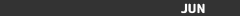
<style>
.page{position:relative;width:240px;height:16px;background:#333333}
.page>*{position:absolute;margin:0}
.t1{font:12.5px "RoundedMplus1c-ExtraBold";color:#ffffff}
</style>
<div class="page">
<p class="t1" style="left:181px;top:3px;width:24px;height:11px">JUN</p>
</div>
